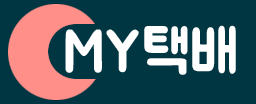
<style>
.page{position:relative;width:256px;height:104px;background:#003641}
.page>*{position:absolute;margin:0}
.t1{font:60px "BMJUA";color:#ffffff}
</style>
<div class="page">
<p class="t1" style="left:65px;top:25px;width:171px;height:50px">MY택배</p>
</div>
